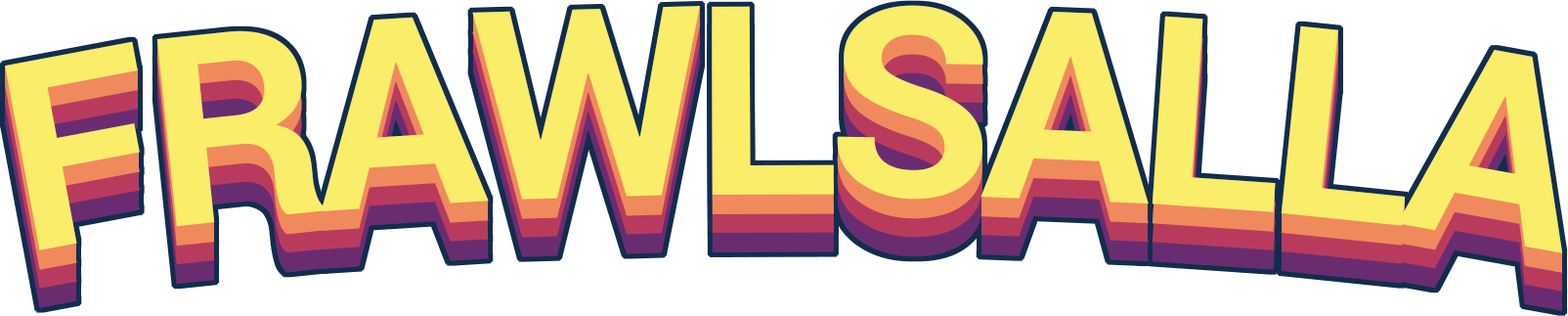
<style>
.page{position:relative;width:1568px;height:316px;background:#ffffff}
.page>*{position:absolute;margin:0}
.t1{font:263.9px "Roboto-Bold";letter-spacing:-0.05em;color:#f9ed69}
.t2{font:263.9px "Roboto-Bold";letter-spacing:-0.05em}
</style>
<div class="page">
<p class="t1" style="left:5px;top:5px;width:1558px;height:248px">FRAWLSALLA</p>
<p class="t1" style="left:5px;top:24px;width:1558px;height:249px">FRAWLSALLA</p>
<p class="t2" style="left:5px;top:43px;width:1558px;height:248px">FRAWLSALLA</p>
<p class="t2" style="left:5px;top:63px;width:1558px;height:248px">FRAWLSALLA</p>
</div>
